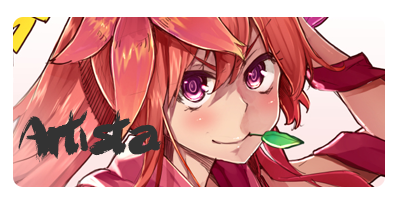
<style>
.page{position:relative;width:400px;height:200px}
.page>*{position:absolute;margin:0}
.t1{font:48px "DrJekyll";color:#333333}
</style>
<div class="page">
<p class="t1" style="left:18px;top:109px;width:144px;height:54px">Artista</p>
</div>
